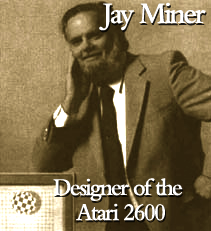
<style>
.page{position:relative;width:211px;height:231px}
.page>*{position:absolute;margin:0}
.t1{font:31.2px "BemboMT-SemiBold";letter-spacing:-0.08em;color:#ffffff;scale:0.95 1}
.t2{font:25px/25px "BemboMT-SemiBold";letter-spacing:-0.08em;color:#ffffff;scale:0.95 1}
</style>
<div class="page">
<p class="t1" style="left:99px;top:2px;width:107px;height:29px">Jay Miner</p>
<p class="t2" style="left:53px;top:178px;width:130px;height:43px;text-align:center">Designer of the <br>Atari 2600</p>
</div>
